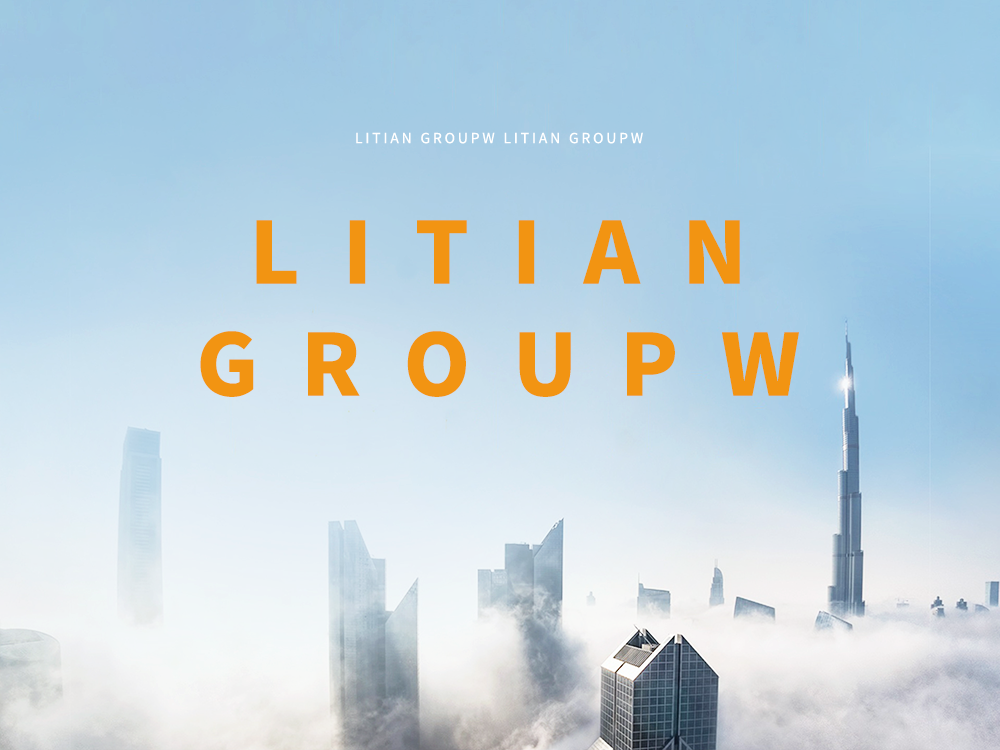
<style>
.page{position:relative;width:1000px;height:750px}
.page>*{position:absolute;margin:0}
.t1{font:14px "NotoSansSC-Regular";letter-spacing:0.2em;color:#ffffff;text-transform:uppercase}
.t2{font:84.9px/112px "NotoSansSC-Black";letter-spacing:0.5em;color:#f29412;text-transform:uppercase}
</style>
<div class="page">
<p class="t1" style="left:356px;top:132px;width:287px;height:12px">litian groupw litian groupw</p>
<p class="t2" style="left:200px;top:220px;width:599px;height:177px;text-align:center">litian<br>groupw</p>
</div>
